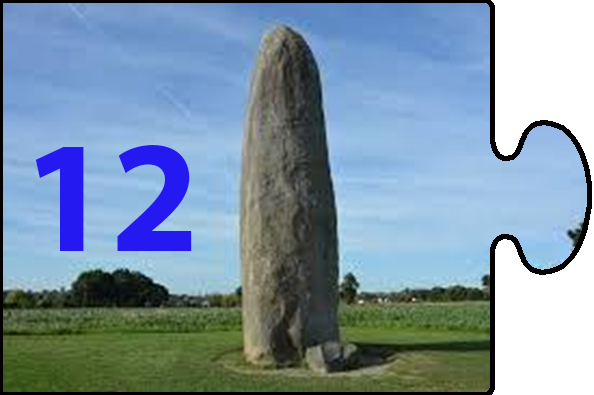
<style>
.page{position:relative;width:594px;height:395px}
.page>*{position:absolute;margin:0}
.t1{font:160px "MyriadPro-Bold";color:#241af1}
</style>
<div class="page">
<p class="t1" style="left:35px;top:145px;width:157px;height:106px">12</p>
</div>
